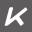
<style>
.page{position:relative;width:32px;height:32px;background:#5e5c5c}
.page>*{position:absolute;margin:0}
.t1{font:33.9px "RazerOblique";color:#ffffff}
</style>
<div class="page">
<p class="t1" style="left:4px;top:7px;width:24px;height:19px">K</p>
</div>
